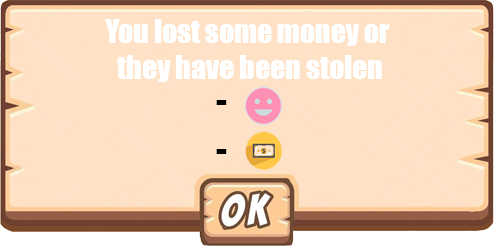
<style>
.page{position:relative;width:494px;height:248px;background:#ffe1c6}
.page>*{position:absolute;margin:0}
.t1{font:30px "Impact";color:#ffffff}
.t2{font:36px "Impact";color:#000000}
</style>
<div class="page">
<p class="t1" style="left:105px;top:19px;width:285px;height:63px;text-align:center">You lost some money or <br>they have been stolen</p>
<p class="t2" style="left:216px;top:100px;width:11px;height:5px">-</p>
<p class="t2" style="left:216px;top:149px;width:11px;height:5px">-</p>
</div>
